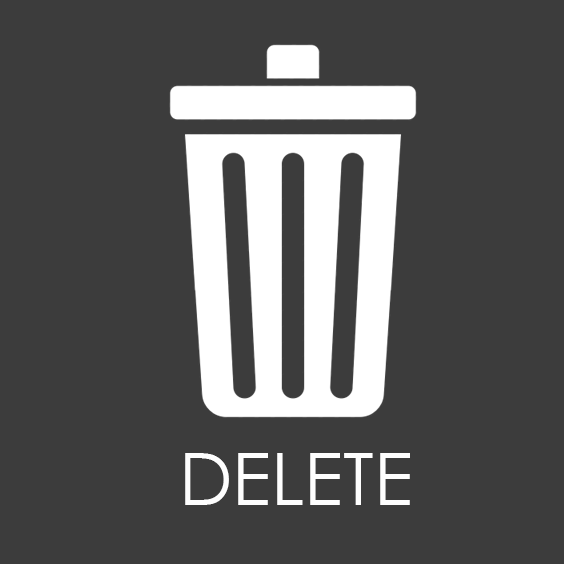
<style>
.page{position:relative;width:564px;height:564px;background:#3c3c3c}
.page>*{position:absolute;margin:0}
.t1{font:72px "CenturyGothic";color:#fefefe}
</style>
<div class="page">
<p class="t1" style="left:185px;top:453px;width:225px;height:52px">DELETE</p>
</div>
